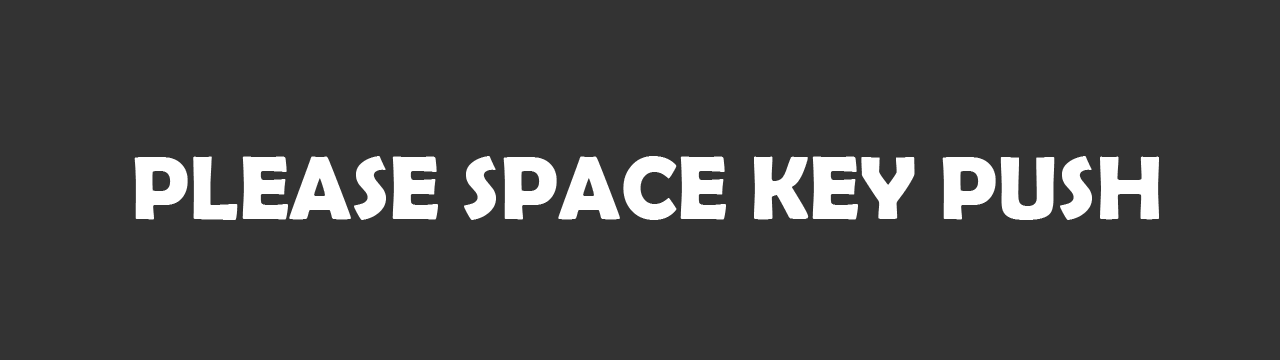
<style>
.page{position:relative;width:1280px;height:360px;background:#333333}
.page>*{position:absolute;margin:0}
.t1{font:90px "BerlinSansFBDemi-Bold";color:#ffffff}
</style>
<div class="page">
<p class="t1" style="left:134px;top:156px;width:1025px;height:64px">PLEASE SPACE KEY PUSH</p>
</div>
